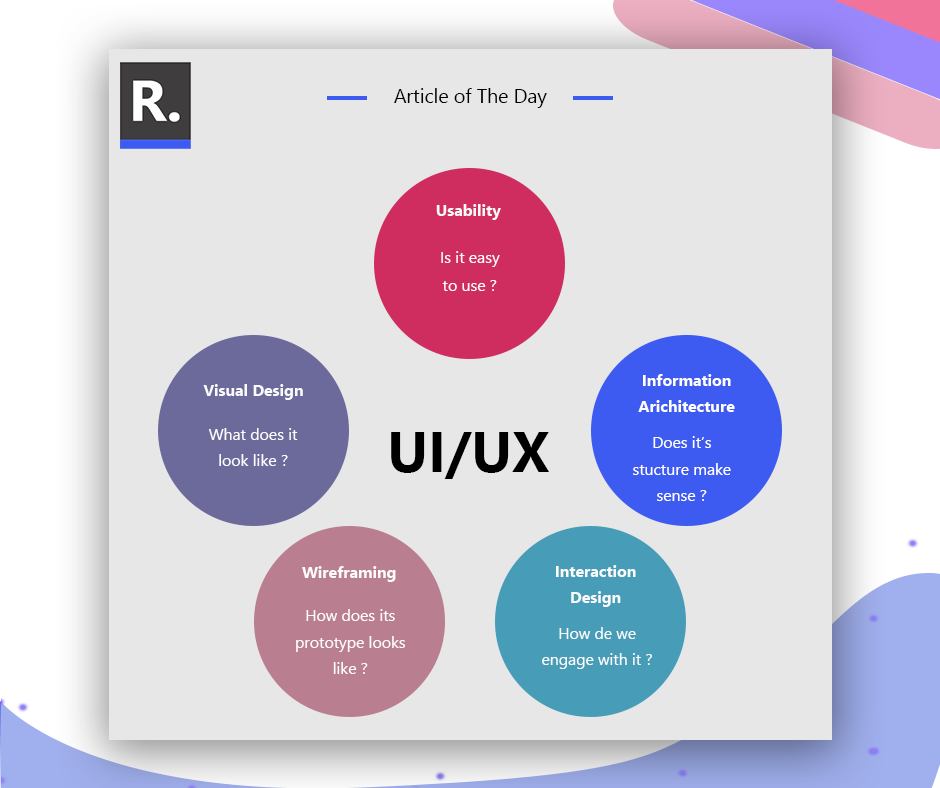
<style>
.page{position:relative;width:940px;height:788px;background:#e7e7e7}
.page>*{position:absolute;margin:0}
.t1{font:19.5px "SegoeUI";color:#000000}
.t2{font:15.8px "SegoeUI-Bold";color:#ffffff}
.t3{font:15.8px/28.5px "SegoeUI";color:#ffffff}
.t4{font:15.8px/26.5px "SegoeUI-Bold";color:#ffffff}
.t5{font:15.8px/26.5px "SegoeUI";color:#ffffff}
.t6{font:56.7px "SegoeUI-Bold";color:#000000}
</style>
<div class="page">
<p class="t1" style="left:394px;top:88px;width:153px;height:20px">Article of The Day</p>
<p class="t2" style="left:436px;top:204px;width:65px;height:16px;opacity:0.96">Usability</p>
<p class="t3" style="left:441px;top:251px;width:59px;height:40px;text-align:center;opacity:0.96">Is it easy<br>to use ?</p>
<p class="t4" style="left:638px;top:374px;width:97px;height:38px;text-align:center">Information Arichitecture</p>
<p class="t2" style="left:203px;top:384px;width:100px;height:16px;opacity:0.96">Visual Design</p>
<p class="t5" style="left:208px;top:428px;width:90px;height:38px;text-align:center;opacity:0.96">What does it look like ?</p>
<p class="t6" style="left:391px;top:432px;width:158px;height:47px">UI/UX</p>
<p class="t5" style="left:633px;top:436px;width:98px;height:65px;text-align:center">Does it’s <br>stucture make sense ?</p>
<p class="t2" style="left:302px;top:566px;width:94px;height:16px;opacity:0.96">Wireframing</p>
<p class="t4" style="left:556px;top:565px;width:80px;height:42px;text-align:center;opacity:0.96">Interaction Design</p>
<p class="t5" style="left:296px;top:609px;width:109px;height:65px;text-align:center;opacity:0.96">How does its prototype looks like ?</p>
<p class="t5" style="left:542px;top:627px;width:110px;height:42px;text-align:center;opacity:0.96">How de we engage with it ?</p>
</div>
